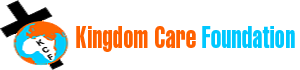
<style>
.page{position:relative;width:300px;height:70px;background:#ffffff}
.page>*{position:absolute;margin:0}
.t1{font:30.6px "Helvetica-Compressed";letter-spacing:0.015em;color:#ff6100;scale:0.76 1}
.t2{font:30.6px "Helvetica-Compressed";letter-spacing:0.015em;color:#00c8ff;scale:0.76 1}
</style>
<div class="page">
<p class="t1" style="left:76px;top:26px;width:219px;height:26px">Kingdom Care <span class="t2">Foundation</span></p>
</div>
